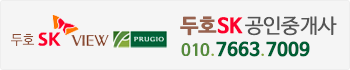
<style>
.page{position:relative;width:350px;height:70px;background:#f5f5f5}
.page>*{position:absolute;margin:0}
.t1{font:20px "NanumBarunGothicOTFLight";color:#555555;font-weight:bold}
.t2{font:20px "NanumBarunGothicOTFBold";color:#98624e;font-weight:bold}
.t3{font:20px "NanumBarunGothicOTFBold";color:#fc002c;font-weight:bold}
.t4{font:18px "NanumBarunGothicOTFBold";color:#005e34;font-weight:bold}
.t5{font:16px "NanumBarunGothicOTF";color:#568b3c;font-weight:bold}
.t6{font:18px "NanumBarunGothicOTFUltraLight";color:#89ab3d;font-weight:bold}
.t7{font:18px "NanumBarunGothicOTFUltraLight";color:#84a736;font-weight:bold}
</style>
<div class="page">
<p class="t1" style="left:180px;top:16px;width:157px;height:20px"><span class="t2">두호</span><span class="t3">SK </span>공인중개사</p>
<p class="t4" style="left:181px;top:41px;width:129px;height:16px"><span class="t5">010</span><span class="t6">.</span>7663<span class="t7">.</span>7009</p>
</div>
